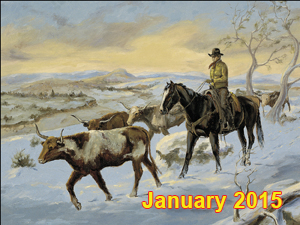
<style>
.page{position:relative;width:300px;height:225px}
.page>*{position:absolute;margin:0}
.t1{font:22.2px "Arial-BoldMT";letter-spacing:0.04em;color:#f6eb13;scale:0.93 1}
</style>
<div class="page">
<p class="t1" style="left:142px;top:192px;width:140px;height:20px">January 2015</p>
</div>
